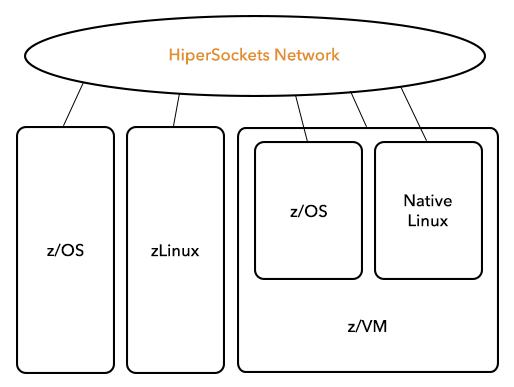
<style>
.page{position:relative;width:514px;height:387px;background:#ffffff}
.page>*{position:absolute;margin:0}
.t1{font:16.7px "AvenirNext-Medium";color:#e28e2b}
.t2{font:16.7px "AvenirNext-Medium";color:#000000}
</style>
<div class="page">
<p class="t1" style="left:169px;top:47px;width:171px;height:18px">HiperSockets Network</p>
<p class="t2" style="left:404px;top:194px;width:48px;height:33px;text-align:center">Native<br>Linux</p>
<p class="t2" style="left:290px;top:204px;width:37px;height:14px">z/OS</p>
<p class="t2" style="left:47px;top:243px;width:37px;height:14px">z/OS</p>
<p class="t2" style="left:151px;top:244px;width:49px;height:13px">zLinux</p>
<p class="t2" style="left:348px;top:319px;width:39px;height:14px">z/VM</p>
</div>
